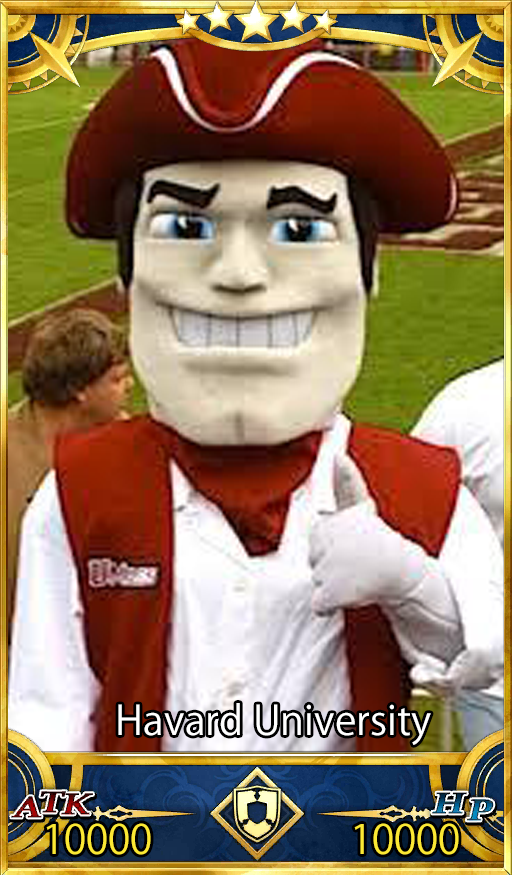
<style>
.page{position:relative;width:512px;height:875px}
.page>*{position:absolute;margin:0}
.t1{font:40px "KozGoPr6N-Regular";color:#ffffff}
.t2{font:40px "KozGoPr6N-Regular";color:#fbe834}
</style>
<div class="page">
<p class="t1" style="left:118px;top:703px;width:313px;height:42px">Havard University</p>
<p class="t2" style="left:46px;top:823px;width:105px;height:32px">10000</p>
<p class="t2" style="left:354px;top:823px;width:105px;height:32px">10000</p>
</div>
